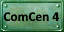
<style>
.page{position:relative;width:64px;height:32px}
.page>*{position:absolute;margin:0}
.t1{font:13.3px "Calibri-Bold";color:#000000}
</style>
<div class="page">
<p class="t1" style="left:3px;top:12px;width:56px;height:10px">ComCen 4</p>
</div>
